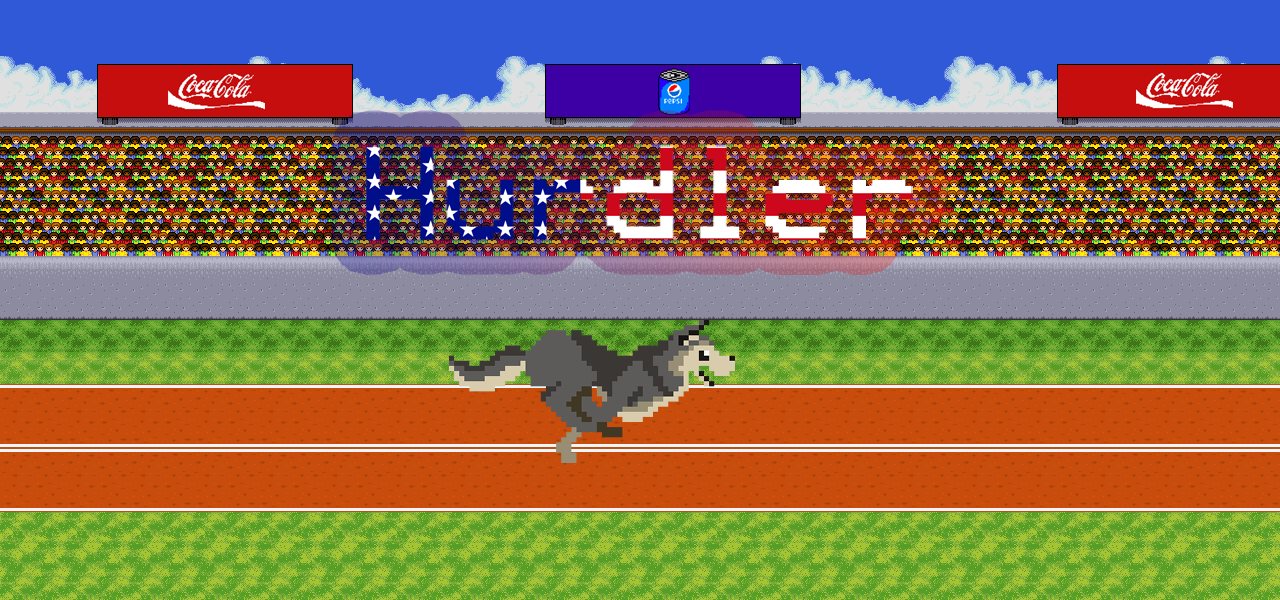
<style>
.page{position:relative;width:1280px;height:600px}
.page>*{position:absolute;margin:0}
.t1{font:106.7px "Terminal"}
</style>
<div class="page">
<p class="t1" style="left:366px;top:145px;width:547px;height:95px">Hurdler</p>
</div>
